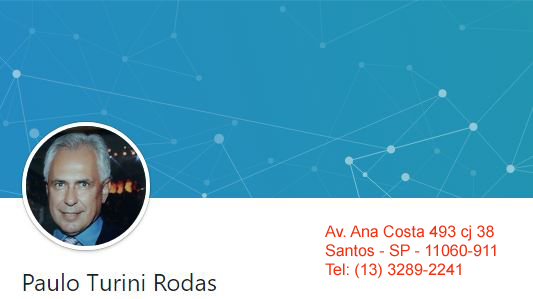
<style>
.page{position:relative;width:533px;height:299px;background:#ffffff}
.page>*{position:absolute;margin:0}
.t1{font:16px "ArialMT";color:#f03112}
</style>
<div class="page">
<p class="t1" style="left:325px;top:225px;width:171px;height:54px">Av. Ana Costa 493 cj 38<br>Santos - SP - 11060-911<br>Tel: (13) 3289-2241</p>
</div>
